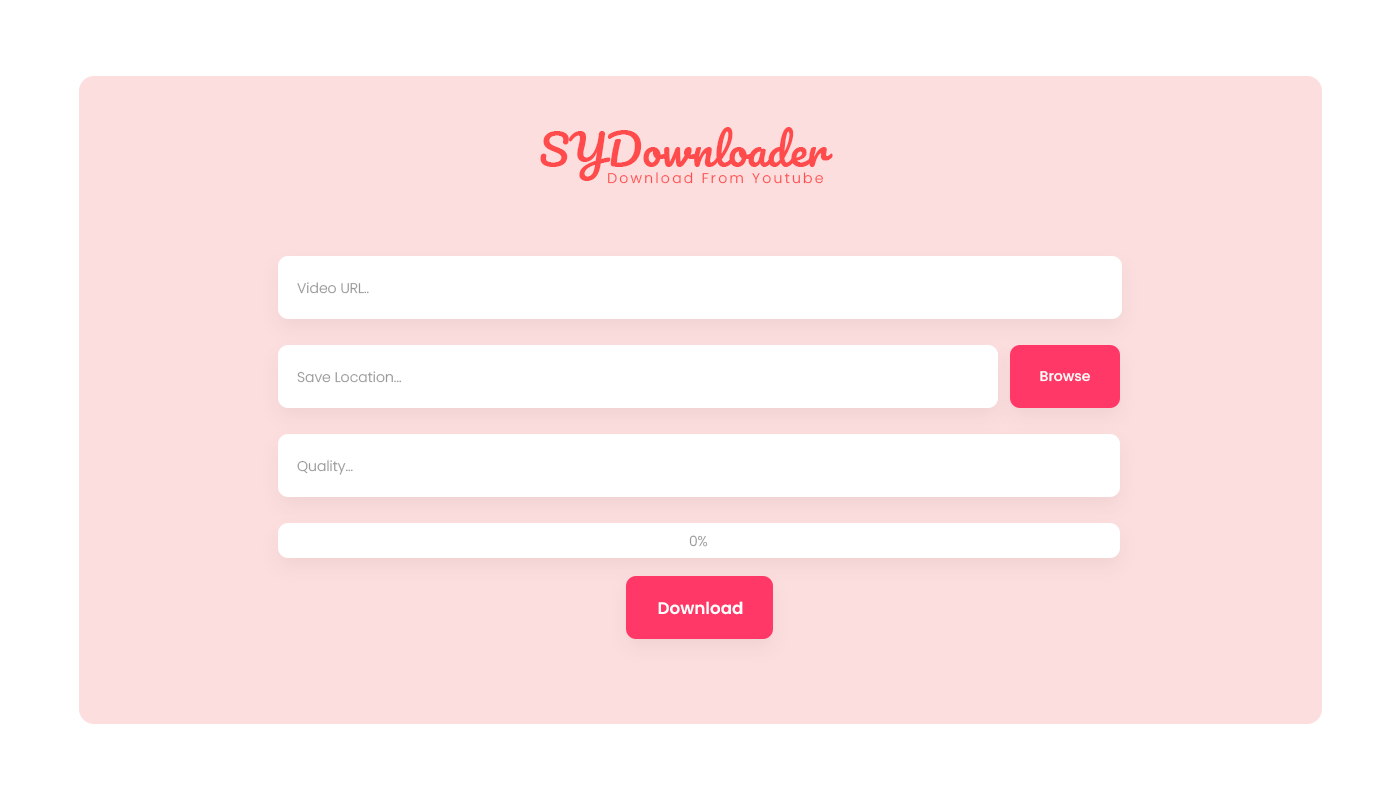
<style>
.page{position:relative;width:1400px;height:800px;background:#ffffff}
.page>*{position:absolute;margin:0}
.t1{font:43.2px "Pacifico-Regular";color:#ff4b4b}
.t2{font:14px "Poppins-Light";letter-spacing:0.16em;color:#ff4b4b}
.t3{font:14px "Poppins-Light";color:#979797}
.t4{font:14px "Poppins-Medium";color:#ffffff}
.t5{font:16.7px "Poppins-SemiBold";color:#ffffff}
</style>
<div class="page">
<p class="t1" style="left:540px;top:127px;width:293px;height:54px">SYDownloader</p>
<p class="t2" style="left:608px;top:172px;width:215px;height:12px">Download From Youtube</p>
<p class="t3" style="left:297px;top:282px;width:72px;height:12px">Video URL..</p>
<p class="t3" style="left:297px;top:371px;width:105px;height:12px">Save Location...</p>
<p class="t4" style="left:1040px;top:371px;width:50px;height:11px">Browse</p>
<p class="t3" style="left:297px;top:460px;width:56px;height:15px">Quality...</p>
<p class="t3" style="left:689px;top:535px;width:19px;height:12px">0%</p>
<p class="t5" style="left:658px;top:601px;width:85px;height:14px">Download</p>
</div>
